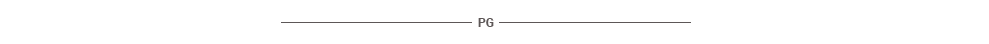
<style>
.page{position:relative;width:989px;height:44px;background:#ffffff}
.page>*{position:absolute;margin:0}
.t1{font:12px "Roboto-Bold";color:#5d5757}
</style>
<div class="page">
<p class="t1" style="left:478px;top:18px;width:16px;height:9px">PG</p>
</div>
